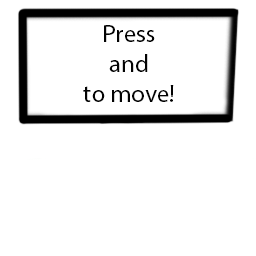
<style>
.page{position:relative;width:256px;height:256px;background:#ffffff}
.page>*{position:absolute;margin:0}
.t1{font:25px "MyriadPro-Regular";color:#030303}
</style>
<div class="page">
<p class="t1" style="left:83px;top:25px;width:91px;height:77px;text-align:center">Press<br>and<br>to move!</p>
</div>
